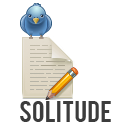
<style>
.page{position:relative;width:128px;height:128px;background:#ffffff}
.page>*{position:absolute;margin:0}
.t1{font:24px "Bebas";color:#3c3c3c}
</style>
<div class="page">
<p class="t1" style="left:20px;top:101px;width:91px;height:21px">solitude</p>
</div>
